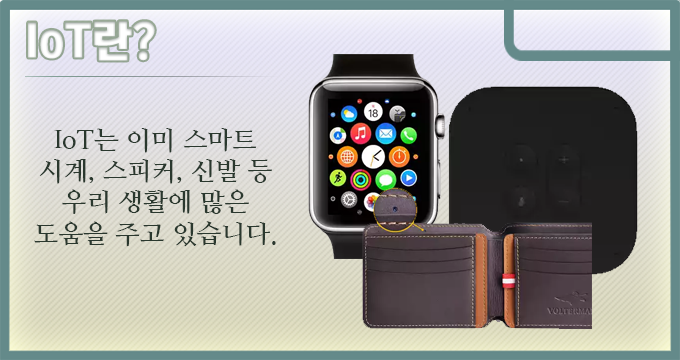
<style>
.page{position:relative;width:680px;height:360px}
.page>*{position:absolute;margin:0}
.t1{font:44px "KoreanTITGD5-R";letter-spacing:-0.01em;color:#ffffff}
.t2{font:26px "NanumMyeongjoBold";letter-spacing:-0.01em;color:#2a382e}
</style>
<div class="page">
<p class="t1" style="left:28px;top:21px;width:127px;height:40px">IoT란?</p>
<p class="t2" style="left:34px;top:128px;width:242px;height:119px;text-align:center">IoT는 이미 스마트 시계, 스피커, 신발 등 우리 생활에 많은 도움을 주고 있습니다.</p>
</div>
